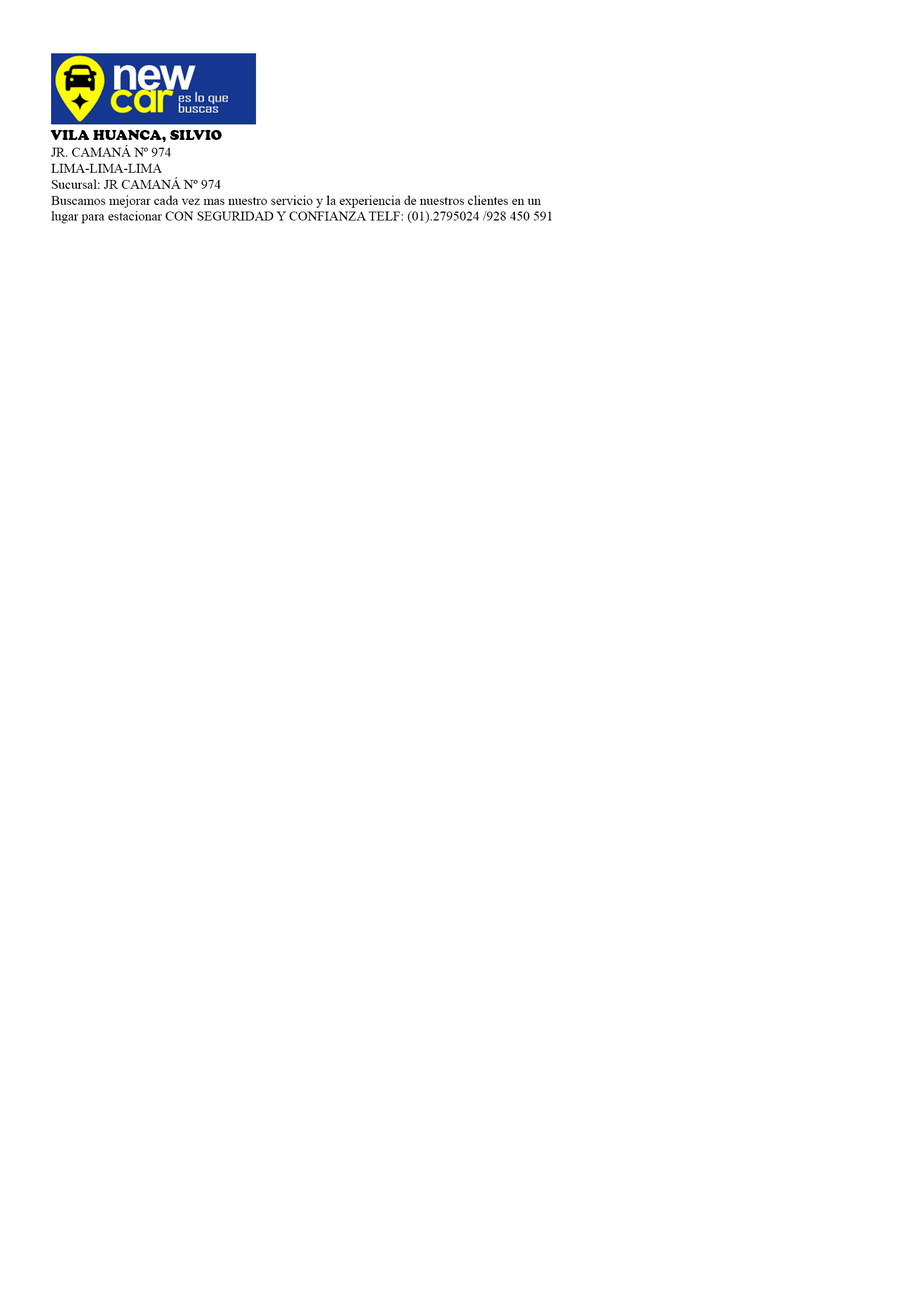
<style>
.page{position:relative;width:918px;height:1299px;background:#ffffff}
.page>*{position:absolute;margin:0}
.t1{font:14.4px "CooperBlack";color:#000000}
.t2{font:13.3px "TimesNewRomanPSMT";color:#000000}
</style>
<div class="page">
<p class="t1" style="left:51px;top:130px;width:171px;height:12px">VILA HUANCA, SILVIO</p>
<p class="t2" style="left:51px;top:145px;width:501px;height:78px">JR. CAMANÁ Nº 974<br>LIMA-LIMA-LIMA<br>Sucursal: JR CAMANÁ Nº 974<br>Buscamos mejorar cada vez mas nuestro servicio y la experiencia de nuestros clientes en un <br>lugar para estacionar CON SEGURIDAD Y CONFIANZA TELF: (01).2795024 /928 450 591</p>
</div>
